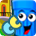
<style>
.page{position:relative;width:36px;height:36px}
.page>*{position:absolute;margin:0}
.t1{font:14.5px "ShowcardGothic-Reg";letter-spacing:-0.015em;color:#82e7ff}
.t2{font:14.5px "ShowcardGothic-Reg";letter-spacing:-0.015em;color:#fff65e}
</style>
<div class="page">
<p class="t1" style="left:3px;top:16px;width:18px;height:18px;rotate:-38deg">C<span class="t2">C</span></p>
</div>
